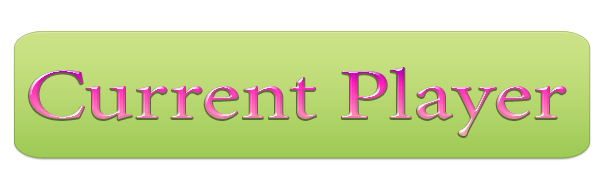
<style>
.page{position:relative;width:599px;height:193px;background:#ffffff}
.page>*{position:absolute;margin:0}
.t1{font:72px "";scale:1.28 1}
</style>
<div class="page">
<p class="t1" style="left:29px;top:67px;width:537px;height:69px">Current Player</p>
</div>
